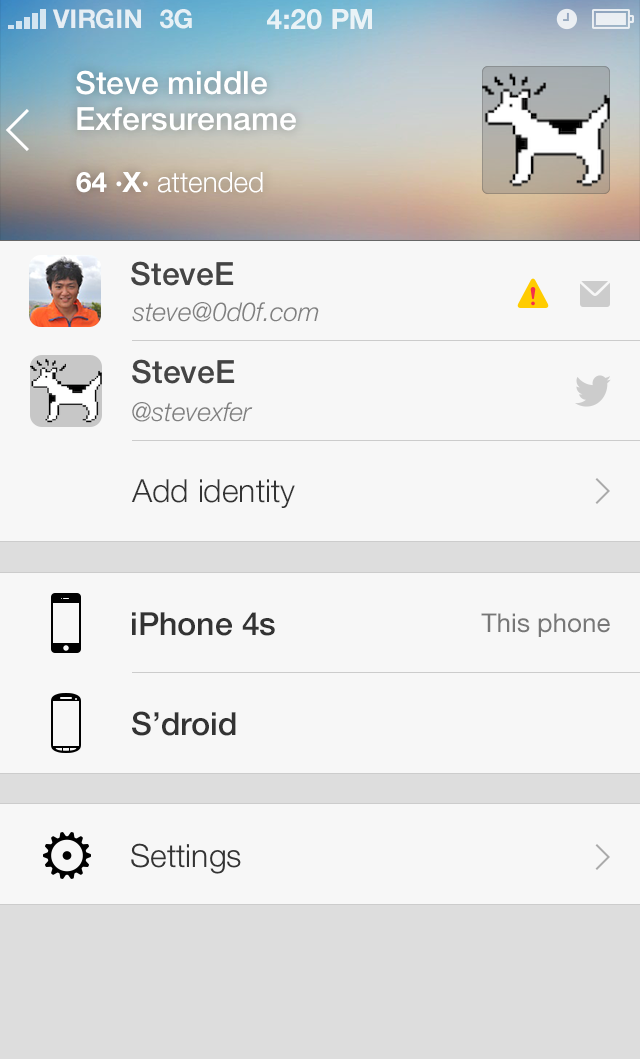
<style>
.page{position:relative;width:640px;height:1059px;background:#f7f7f7}
.page>*{position:absolute;margin:0}
.t1{font:26px "HelveticaNeue-Bold";color:#ffffff;text-transform:uppercase}
.t2{font:26px "HelveticaNeue-Bold";color:#e7f1f6;text-transform:uppercase}
.t3{font:28px "HelveticaNeue-Bold";color:#ffffff;text-transform:uppercase}
.t4{font:32px/36px "HelveticaNeue-Medium";color:#ffffff}
.t5{font:28px "HelveticaNeue-Light";color:#ffffff}
.t6{font:28px "HelveticaNeue-Bold";color:#ffffff}
.t7{font:32px "HelveticaNeue-Medium";color:#444444}
.t8{font:26px "HelveticaNeue-LightItalic";color:#808080}
.t9{font:32px "HelveticaNeue-Light";color:#333333}
.t10{font:32px "HelveticaNeue-Medium";color:#333333}
.t11{font:26px "HelveticaNeue";color:#777777}
</style>
<div class="page">
<p class="t1" style="left:52px;top:9px;width:89px;height:20px;opacity:0.8">VIRGIN</p>
<p class="t2" style="left:160px;top:9px;width:32px;height:20px">3G</p>
<p class="t3" style="left:267px;top:9px;width:105px;height:21px;opacity:0.8">4:20 pM</p>
<p class="t4" style="left:76px;top:70px;width:220px;height:61px">Steve middle <br>Exfersurename</p>
<p class="t5" style="left:76px;top:172px;width:187px;height:21px"><span class="t6">64 ·X· </span>attended</p>
<p class="t7" style="left:131px;top:261px;width:103px;height:25px">SteveE</p>
<p class="t8" style="left:132px;top:302px;width:187px;height:20px">steve@0d0f.com</p>
<p class="t7" style="left:132px;top:359px;width:103px;height:25px">SteveE</p>
<p class="t8" style="left:132px;top:402px;width:121px;height:20px">@stevexfer</p>
<p class="t9" style="left:131px;top:479px;width:164px;height:29px">Add identity</p>
<p class="t10" style="left:132px;top:612px;width:143px;height:24px">iPhone 4s</p>
<p class="t11" style="left:481px;top:613px;width:129px;height:24px">This phone</p>
<p class="t10" style="left:132px;top:711px;width:104px;height:25px">S’droid</p>
<p class="t9" style="left:131px;top:843px;width:110px;height:31px">Settings</p>
</div>
